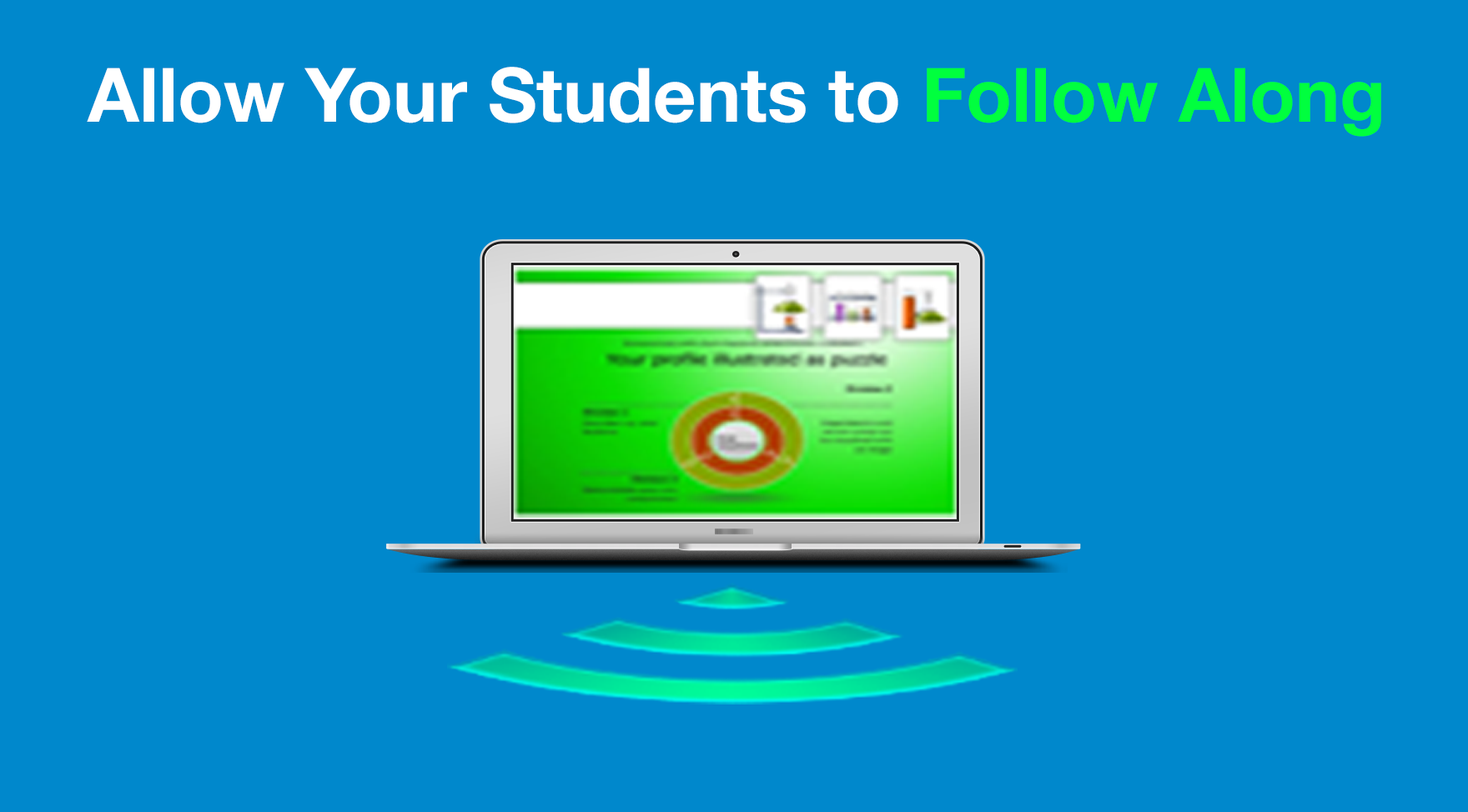
<style>
.page{position:relative;width:1468px;height:812px;background:#0088cc}
.page>*{position:absolute;margin:0}
.t1{font:75.1px "HelveticaNeue-Bold";color:#ffffff}
.t2{font:75.1px "HelveticaNeue-Bold";color:#00ff3e}
.t3{font:6.4px "HelveticaNeue";font-weight:bold;scale:1.12 1}
.t4{font:6.4px "HelveticaNeue-UltraLight";font-weight:bold;scale:1.12 1}
</style>
<div class="page">
<p class="t1" style="left:87px;top:67px;width:1294px;height:70px">Allow Your Students to <span class="t2">Follow Along</span></p>
<p class="t3" style="left:715px;top:529px;width:38px;height:6px">MacBook <span class="t4">Air</span></p>
</div>
